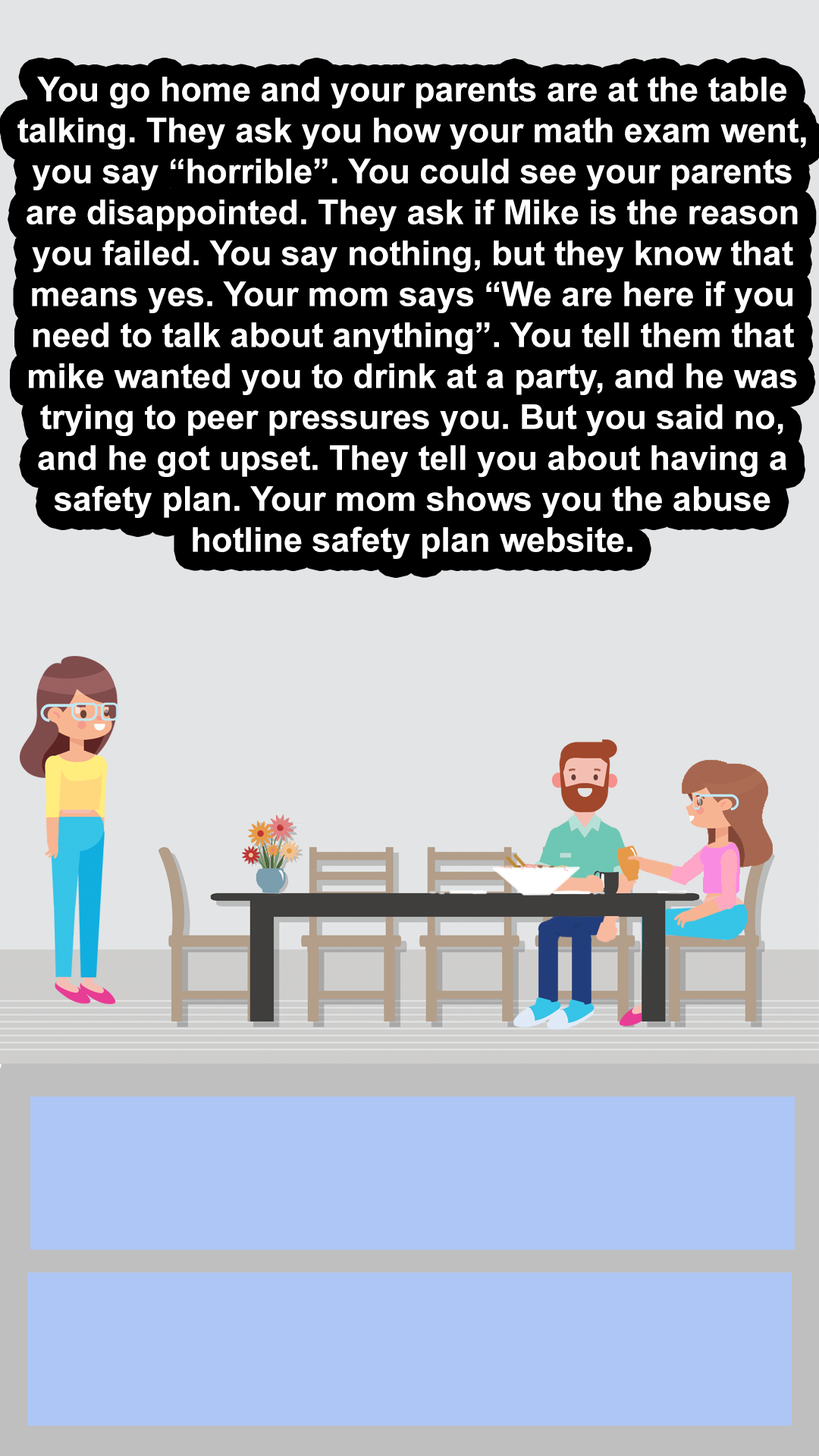
<style>
.page{position:relative;width:819px;height:1456px;background:#e3e4e5}
.page>*{position:absolute;margin:0}
.t1{font:34.1px "Arial-BoldMT";color:#ffffff}
</style>
<div class="page">
<p class="t1" style="left:17px;top:77px;width:789px;height:482px;text-align:center">You go home and your parents are at the table talking. They ask you how your math exam went, you say “horrible”. You could see your parents are disappointed. They ask if Mike is the reason you failed. You say nothing, but they know that means yes. Your mom says “We are here if you need to talk about anything”. You tell them that mike wanted you to drink at a party, and he was trying to peer pressures you. But you said no, and he got upset. They tell you about having a safety plan. Your mom shows you the abuse   hotline safety plan website.</p>
</div>
